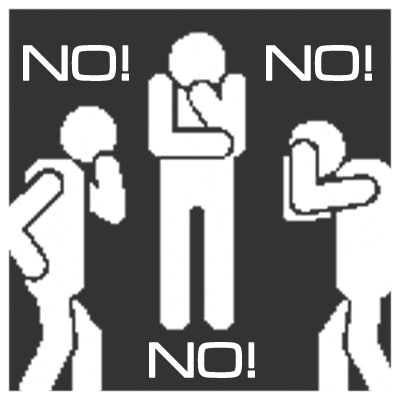
<style>
.page{position:relative;width:400px;height:400px;background:#333333}
.page>*{position:absolute;margin:0}
.t1{font:51.1px "716";color:#ffffff;font-weight:bold}
</style>
<div class="page">
<p class="t1" style="left:23px;top:45px;width:106px;height:36px">NO!</p>
<p class="t1" style="left:266px;top:45px;width:106px;height:36px">NO!</p>
<p class="t1" style="left:149px;top:342px;width:106px;height:36px">NO!</p>
</div>
